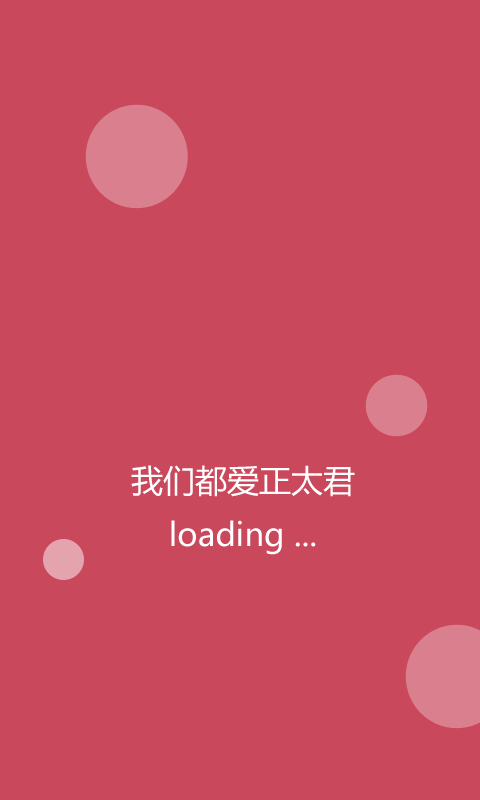
<style>
.page{position:relative;width:480px;height:800px;background:#c9485b}
.page>*{position:absolute;margin:0}
.t1{font:32px/54px "MicrosoftYaHei";color:#ffffff}
</style>
<div class="page">
<p class="t1" style="left:131px;top:465px;width:224px;height:90px;text-align:center">我们都爱正太君<br>loading ...</p>
</div>
